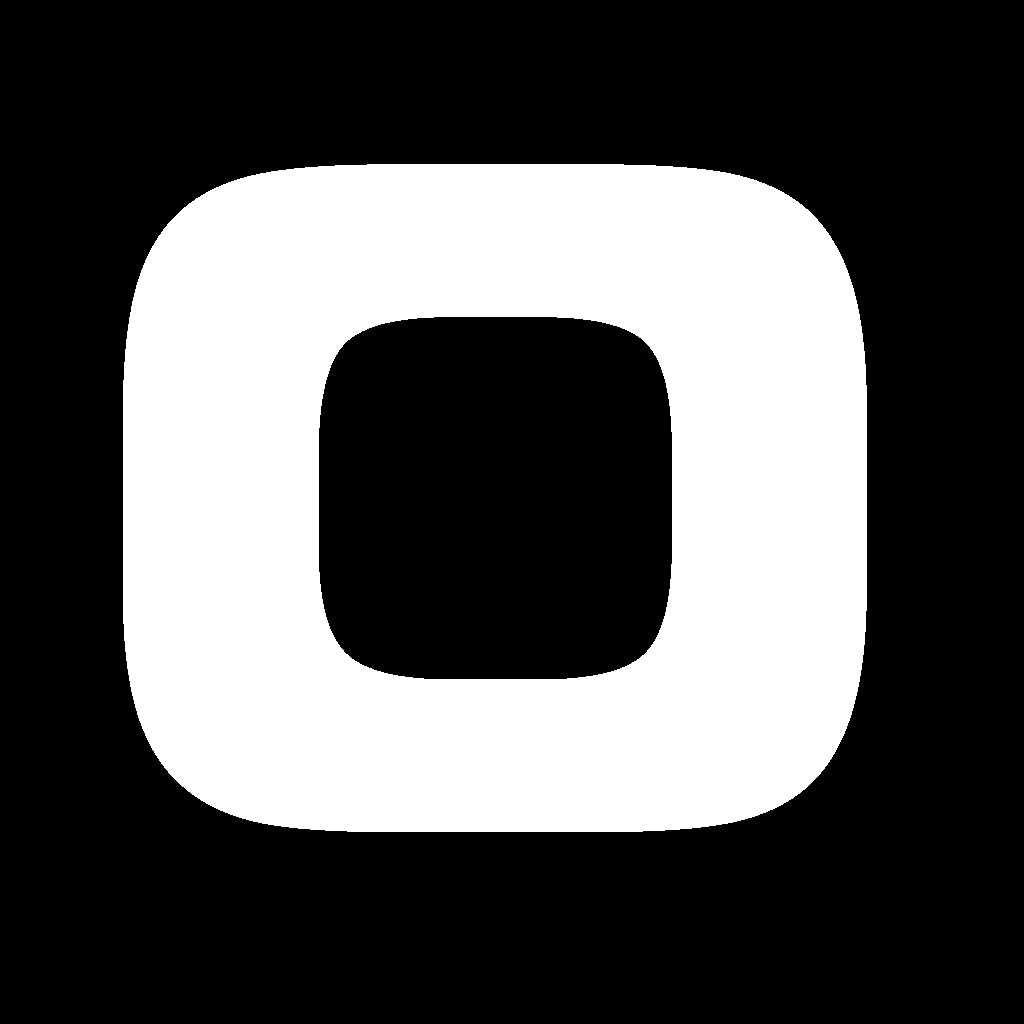
<style>
.page{position:relative;width:1024px;height:1024px;background:#000000}
.page>*{position:absolute;margin:0}
.t1{font:895.8px "Square721BT-BoldExtended";color:#ffffff}
</style>
<div class="page">
<p class="t1" style="left:123px;top:164px;width:744px;height:668px">0</p>
</div>
